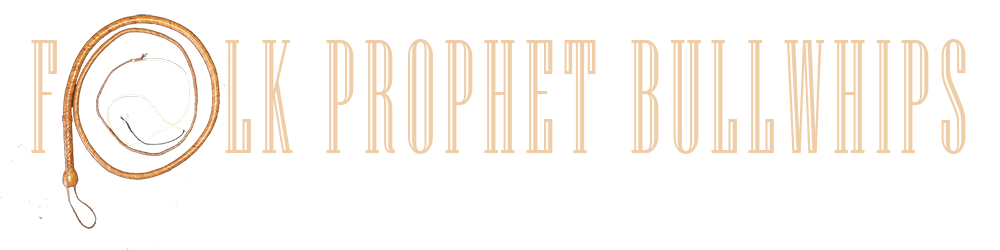
<style>
.page{position:relative;width:1000px;height:250px;background:#ffffff}
.page>*{position:absolute;margin:0}
.t1{font:161.3px "NiagaraEngraved-Reg";letter-spacing:0.085em;color:#efcea7;scale:0.64 1}
</style>
<div class="page">
<p class="t1" style="left:31px;top:40px;width:26px;height:113px">F</p>
<p class="t1" style="left:225px;top:39px;width:741px;height:115px">LK PROPHET BULLWHIPS</p>
</div>
